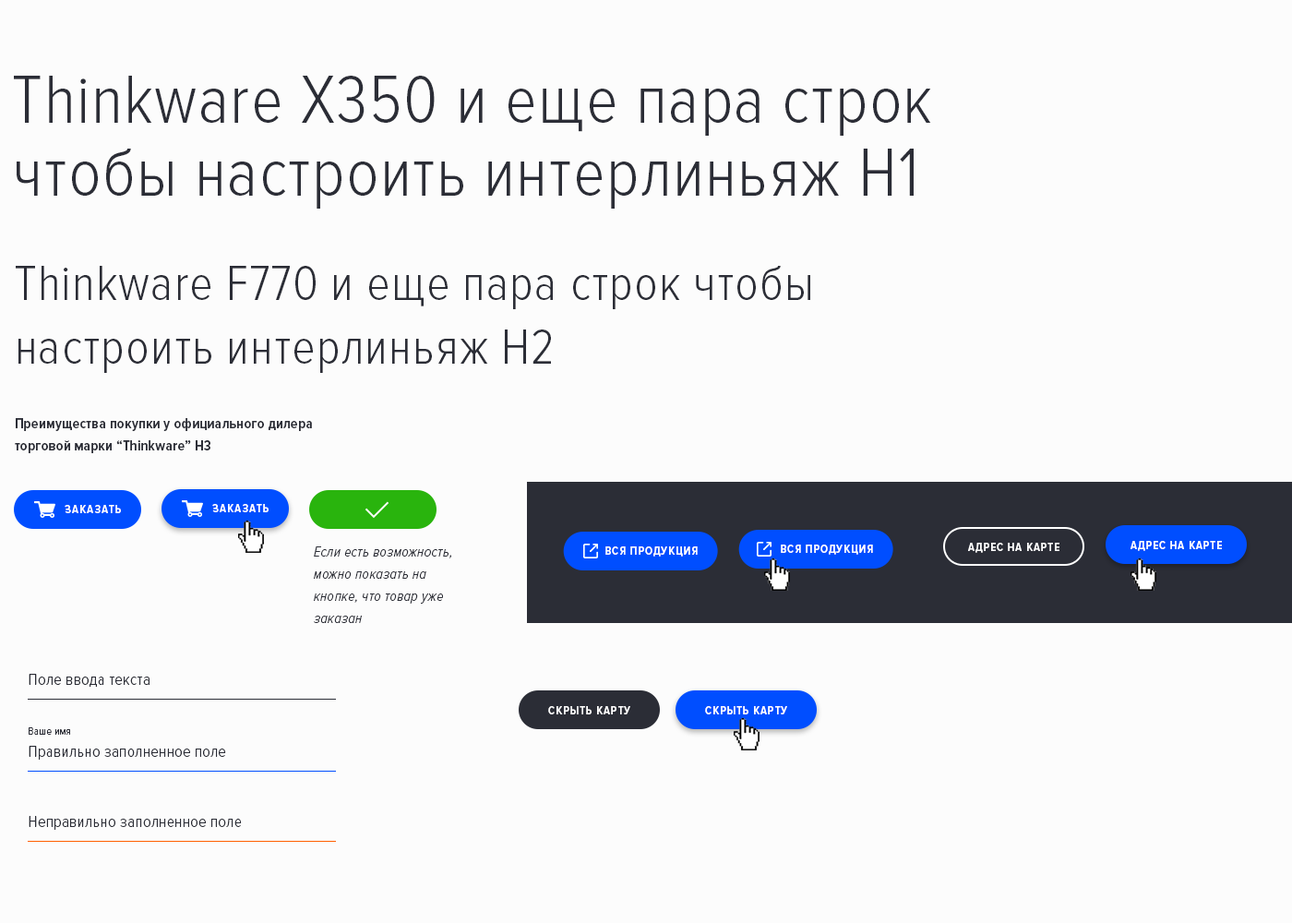
<style>
.page{position:relative;width:1292px;height:923px;background:#fcfcfc}
.page>*{position:absolute;margin:0}
.t1{font:69.2px/63.7px "ProximaNovaCond-Light";letter-spacing:0.02em;color:#2b2d36}
.t2{font:69.2px/72.9px "ProximaNovaCond-Light";letter-spacing:0.02em;color:#2b2d36}
.t3{font:50.8px/63.7px "ProximaNovaCond-Light";letter-spacing:0.02em;color:#2b2d36}
.t4{font:14.8px/22.1px "ProximaNovaCond-Semibold";letter-spacing:0.02em;color:#2b2d36}
.t5{font:12px "ProximaNovaCond-Semibold";letter-spacing:0.09em;color:#ffffff;text-transform:uppercase}
.t6{font:12px "ProximaNovaCond-Semibold";letter-spacing:0.07em;color:#ffffff;text-transform:uppercase}
.t7{font:14.8px/22.1px "ProximaNovaCond-LightIt";letter-spacing:0.02em;color:#2b2d36}
.t8{font:16.6px "ProximaNovaCond-Light";letter-spacing:0.02em;color:#2b2d36}
.t9{font:11.1px "ProximaNovaCond-Light";letter-spacing:0.02em;color:#2b2d36}
</style>
<div class="page">
<p class="t1" style="left:14px;top:76px;width:917px;height:133px">Thinkware X350 и еще пара строк<br><span class="t2">чтобы настроить интерлиньяж H1</span></p>
<p class="t3" style="left:16px;top:266px;width:794px;height:107px">Thinkware F770 и еще пара строк чтобы<br>настроить интерлиньяж H2</p>
<p class="t4" style="left:15px;top:418px;width:297px;height:35px">Преимущества покупки у официального дилера <br>торговой марки “Thinkware” H3</p>
<p class="t5" style="left:65px;top:505px;width:56px;height:8px">Заказать</p>
<p class="t5" style="left:212px;top:504px;width:57px;height:8px">Заказать</p>
<p class="t6" style="left:781px;top:545px;width:92px;height:10px">Всяпродукция</p>
<p class="t6" style="left:968px;top:543px;width:91px;height:10px">Адрес на карте</p>
<p class="t6" style="left:1131px;top:541px;width:91px;height:10px">Адрес на карте</p>
<p class="t7" style="left:314px;top:546px;width:137px;height:77px">Если есть возможность,<br>можно показать на кнопке, что товар уже заказан</p>
<p class="t6" style="left:605px;top:546px;width:93px;height:11px">Всяпродукция</p>
<p class="t8" style="left:29px;top:674px;width:121px;height:14px">Поле ввода текста</p>
<p class="t6" style="left:548px;top:706px;width:82px;height:8px">Скрыть карту</p>
<p class="t6" style="left:705px;top:706px;width:82px;height:8px">Скрыть карту</p>
<p class="t9" style="left:29px;top:727px;width:41px;height:8px">Ваше имя</p>
<p class="t8" style="left:29px;top:746px;width:197px;height:14px">Правильно заполненное поле</p>
<p class="t8" style="left:29px;top:816px;width:213px;height:14px">Неправильно заполненное поле</p>
</div>
